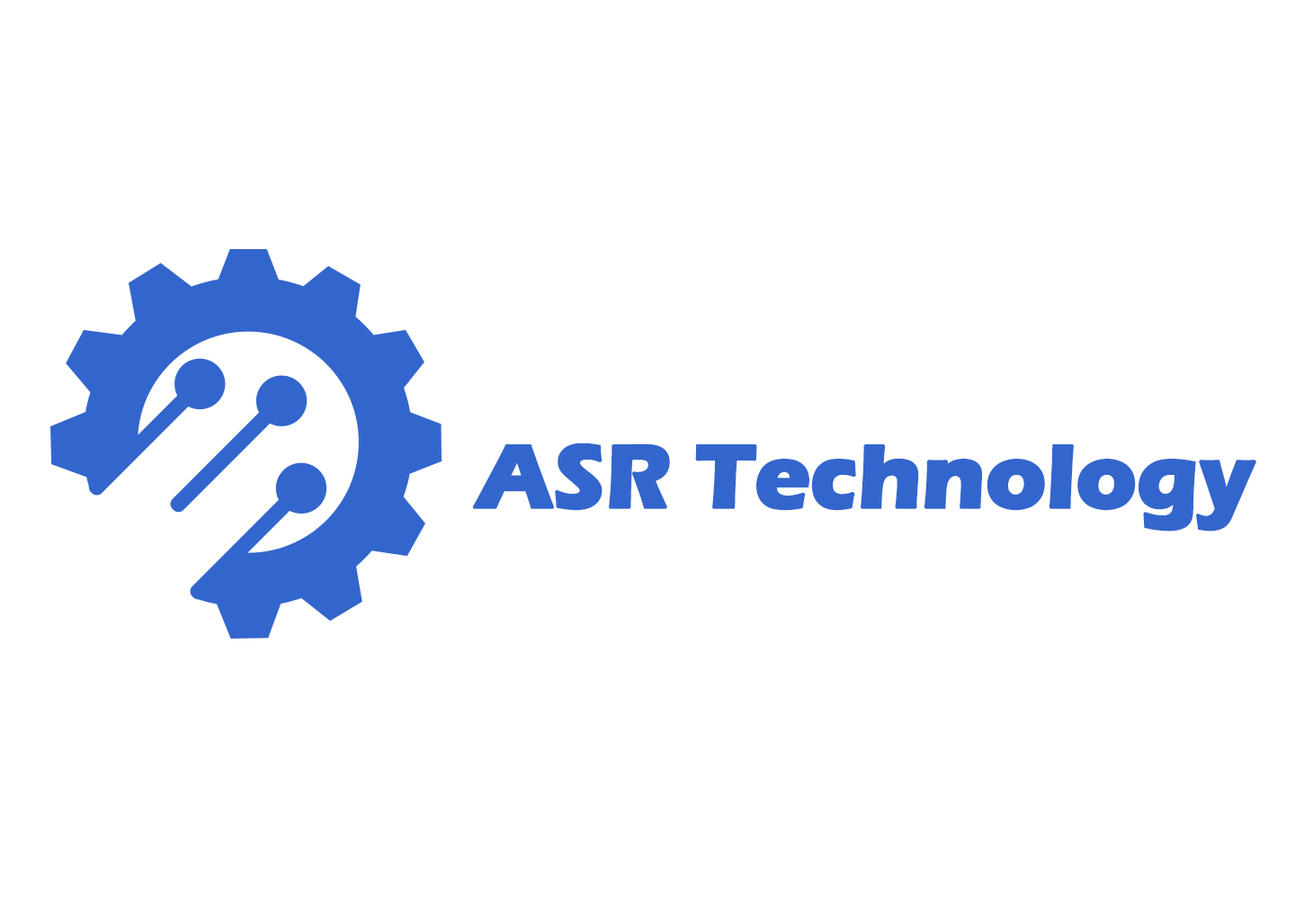
<style>
.page{position:relative;width:1295px;height:921px;background:#ffffff}
.page>*{position:absolute;margin:0}
.t1{font:92.9px "ErasITC-Bold";letter-spacing:-0.02em;color:#3366cc;font-weight:bold}
</style>
<div class="page">
<p class="t1" style="left:472px;top:442px;width:784px;height:89px">ASR Technology</p>
</div>
